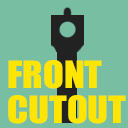
<style>
.page{position:relative;width:128px;height:128px;background:#78bea2}
.page>*{position:absolute;margin:0}
.t1{font:34.8px/34.7px "Impact";color:#ffe500;scale:1.1 1}
</style>
<div class="page">
<p class="t1" style="left:8px;top:60px;width:118px;height:64px">FRONT<br>CUTOUT</p>
</div>
